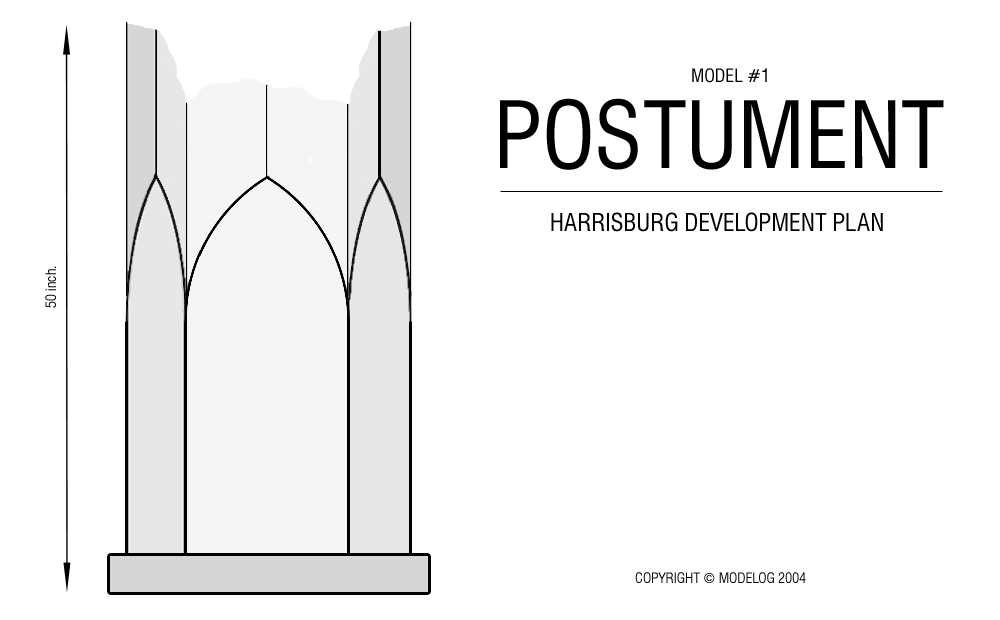
<style>
.page{position:relative;width:1000px;height:620px;background:#ffffff}
.page>*{position:absolute;margin:0}
.t1{font:18px "Swiss721BT-RomanCondensed";color:#000000}
.t2{font:90px "Swiss721BT-RomanCondensed";color:#000000}
.t3{font:24px "Swiss721BT-RomanCondensed";color:#000000}
.t4{font:14px "Swiss721BT-RomanCondensed";color:#000000}
</style>
<div class="page">
<p class="t1" style="left:692px;top:68px;width:75px;height:15px">MODEL #1</p>
<p class="t2" style="left:500px;top:98px;width:444px;height:72px">POSTUMENT</p>
<p class="t3" style="left:551px;top:212px;width:332px;height:20px">HARRISBURG DEVELOPMENT PLAN</p>
<p class="t4" style="left:45px;top:266px;width:11px;height:42px;rotate:-90deg">50 inch.</p>
<p class="t4" style="left:635px;top:572px;width:171px;height:11px">COPYRIGHT © MODELOG 2004</p>
</div>
